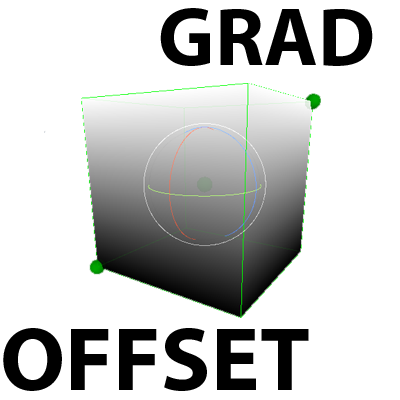
<style>
.page{position:relative;width:400px;height:400px;background:#ffffff}
.page>*{position:absolute;margin:0}
.t1{font:82.4px "MyriadPro-Bold";color:#000000}
.t2{font:91.1px "MyriadPro-Bold";color:#000000}
</style>
<div class="page">
<p class="t1" style="left:160px;top:8px;width:213px;height:58px">GRAD</p>
<p class="t2" style="left:3px;top:328px;width:306px;height:63px">OFFSET</p>
</div>
